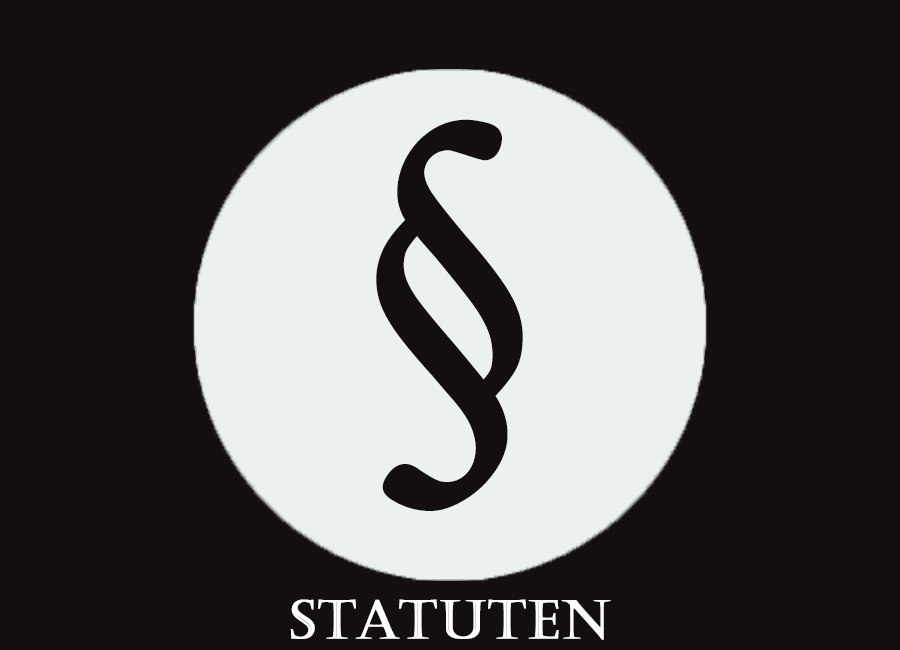
<style>
.page{position:relative;width:900px;height:650px;background:#130f0f}
.page>*{position:absolute;margin:0}
.t1{font:400px "Castellar";letter-spacing:0.025em;color:#130f0f;font-weight:bold}
.t2{font:53px "Castellar";letter-spacing:0.025em;color:#ffffff;font-weight:bold}
</style>
<div class="page">
<p class="t1" style="left:376px;top:119px;width:147px;height:392px">§</p>
<p class="t2" style="left:290px;top:599px;width:321px;height:41px">Statuten</p>
</div>
